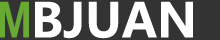
<style>
.page{position:relative;width:220px;height:40px;background:#333333}
.page>*{position:absolute;margin:0}
.t1{font:47px "MicrosoftYaHei-Bold";color:#68a933;text-transform:uppercase;scale:0.72 1}
.t2{font:47px "MicrosoftYaHei-Bold";color:#ffffff;text-transform:uppercase}
</style>
<div class="page">
<p class="t1" style="left:0px;top:1px;width:29px;height:37px">M</p>
<p class="t2" style="left:35px;top:1px;width:158px;height:38px">BJuan</p>
</div>
